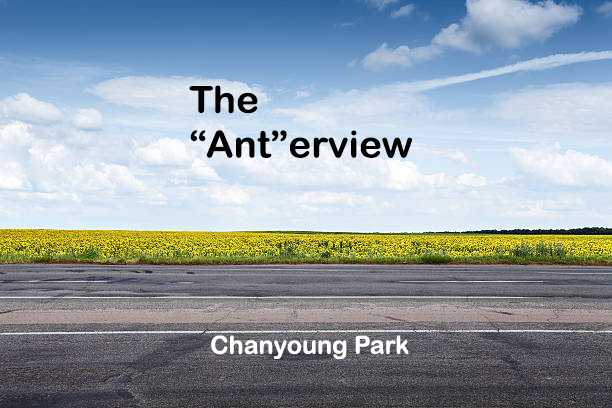
<style>
.page{position:relative;width:612px;height:408px}
.page>*{position:absolute;margin:0}
.t1{font:37.2px "ArialRoundedMTBold";color:#000000;scale:1.04 1}
.t2{font:25px "ArialRoundedMTBold";color:#ffffff}
</style>
<div class="page">
<p class="t1" style="left:189px;top:85px;width:224px;height:73px">The “Ant”erview</p>
<p class="t2" style="left:211px;top:335px;width:198px;height:24px">Chanyoung Park</p>
</div>
